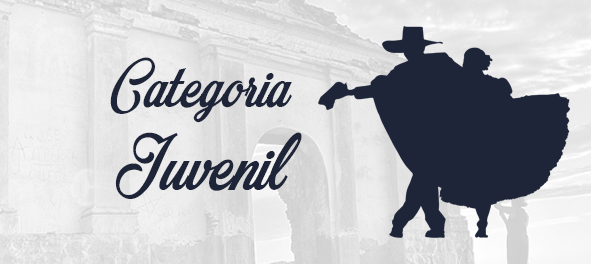
<style>
.page{position:relative;width:591px;height:264px}
.page>*{position:absolute;margin:0}
.t1{font:71.7px/83.6px "MocharyPERSONALUSEONLY";letter-spacing:0.005em;color:#1f2539}
.t2{font:82.7px/83.6px "MocharyPERSONALUSEONLY";letter-spacing:0.005em;color:#1f2539}
</style>
<div class="page">
<p class="t1" style="left:110px;top:57px;width:192px;height:142px;text-align:center">Categoria<br><span class="t2">Juvenil</span></p>
</div>
